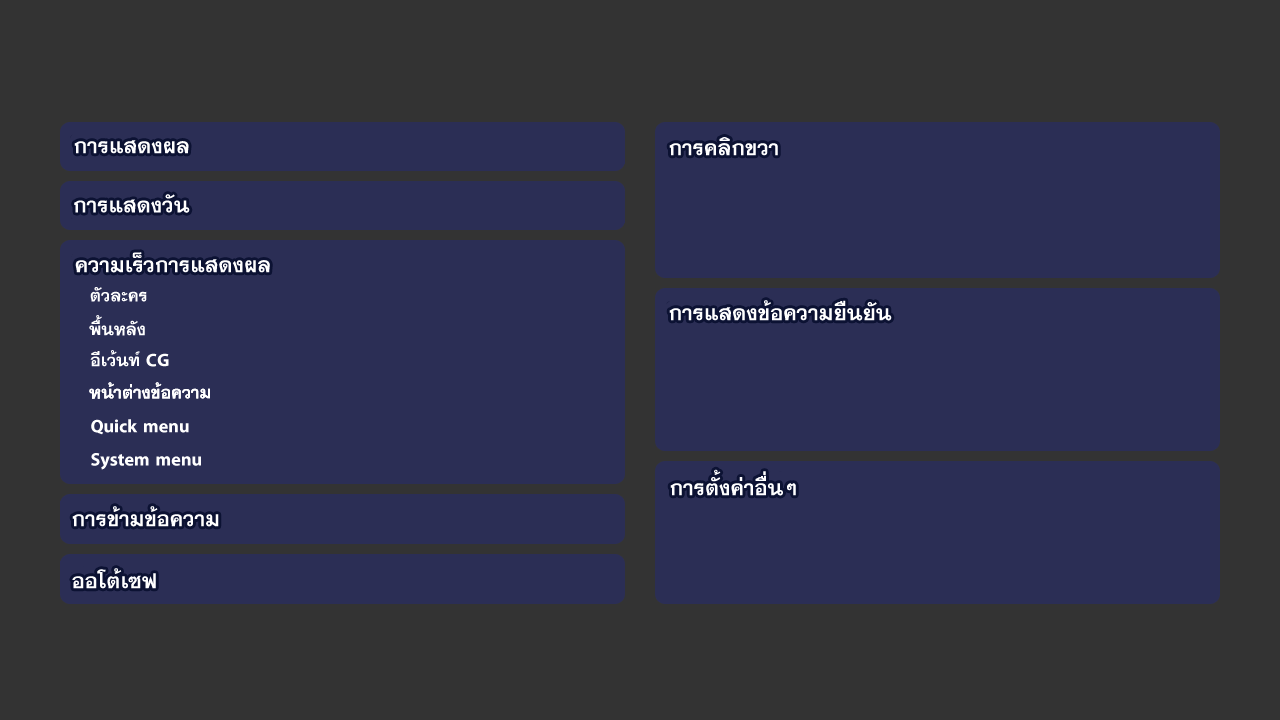
<style>
.page{position:relative;width:1280px;height:720px;background:#2b2e55}
.page>*{position:absolute;margin:0}
.t1{font:30px "TFPhethai";color:#ffffff}
.t2{font:24px "TFPhethai";color:#ffffff}
</style>
<div class="page">
<p class="t1" style="left:669px;top:137px;width:109px;height:19px">การคลิกขวา</p>
<p class="t1" style="left:74px;top:140px;width:115px;height:14px">การแสดงผล</p>
<p class="t1" style="left:74px;top:194px;width:116px;height:19px">การแสดงวัน</p>
<p class="t1" style="left:75px;top:252px;width:195px;height:21px">ความเร็วการแสดงผล</p>
<p class="t2" style="left:90px;top:287px;width:57px;height:15px">ตัวละคร</p>
<p class="t1" style="left:669px;top:300px;width:223px;height:21px">การแสดงข้อความยืนยัน</p>
<p class="t2" style="left:89px;top:315px;width:56px;height:21px">พื้นหลัง</p>
<p class="t2" style="left:90px;top:350px;width:79px;height:17px">อีเว้นท์ CG</p>
<p class="t2" style="left:89px;top:382px;width:121px;height:17px">หน้าต่างข้อความ</p>
<p class="t2" style="left:89px;top:382px;width:121px;height:17px">หน้าต่างข้อความ</p>
<p class="t2" style="left:91px;top:419px;width:98px;height:16px">Quick menu</p>
<p class="t2" style="left:91px;top:453px;width:110px;height:17px">System menu</p>
<p class="t1" style="left:670px;top:469px;width:126px;height:27px">การตั้งค่าอื่นๆ</p>
<p class="t1" style="left:72px;top:506px;width:147px;height:21px">การข้ามข้อความ</p>
<p class="t1" style="left:72px;top:568px;width:84px;height:21px">ออโต้เซฟ</p>
</div>
